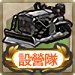
<style>
.page{position:relative;width:75px;height:75px}
.page>*{position:absolute;margin:0}
.t1{font:14px "GothicMB101Pr6N-Medium";letter-spacing:-0.08em;color:#ff5a00}
</style>
<div class="page">
<p class="t1" style="left:18px;top:53px;width:40px;height:14px">設營隊</p>
</div>
